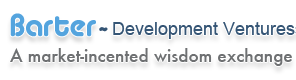
<style>
.page{position:relative;width:296px;height:80px;background:#ffffff}
.page>*{position:absolute;margin:0}
.t1{font:32px "Alba";color:#54a4de}
.t2{font:24px "Alba";color:#355575}
.t3{font:12px "Alba";color:#1b242c}
.t4{font:17px "Futura-Medium";color:#6e7072}
</style>
<div class="page">
<p class="t1" style="left:10px;top:13px;width:86px;height:24px">Barter</p>
<p class="t2" style="left:99px;top:27px;width:9px;height:5px"><span class="t3">  </span>~</p>
<p class="t4" style="left:10px;top:48px;width:282px;height:18px">A market-incented wisdom exchange</p>
</div>
